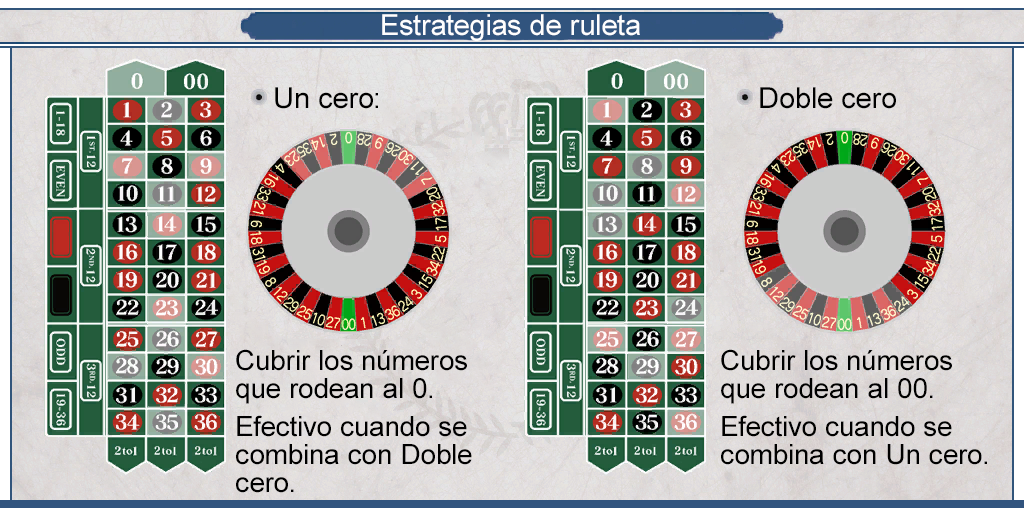
<style>
.page{position:relative;width:1024px;height:512px}
.page>*{position:absolute;margin:0}
.t1{font:29px "ArialMT";color:#fefefe}
.t2{font:29px "ArialMT";color:#000000}
.t3{font:28px/28px "ArialMT";color:#000000}
</style>
<div class="page">
<p class="t1" style="left:382px;top:14px;width:258px;height:27px">Estrategias de ruleta</p>
<p class="t2" style="left:275px;top:87px;width:103px;height:22px">Un cero:</p>
<p class="t2" style="left:760px;top:87px;width:136px;height:22px">Doble cero</p>
<p class="t3" style="left:236px;top:349px;width:231px;height:55px">Cubrir los números <br>que rodean al 0.</p>
<p class="t3" style="left:721px;top:349px;width:231px;height:55px">Cubrir los números<br>que rodean al 00.</p>
<p class="t3" style="left:236px;top:415px;width:236px;height:78px">Efectivo cuando se <br>combina con Doble <br>cero.</p>
<p class="t3" style="left:721px;top:415px;width:266px;height:50px">Efectivo cuando se<br>combina con Un cero.</p>
</div>
